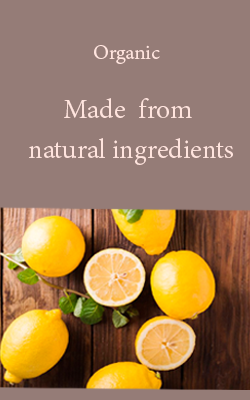
<style>
.page{position:relative;width:250px;height:400px;background:#957c77}
.page>*{position:absolute;margin:0}
.t1{font:25px "AdobeThai-Regular";color:#ffe4de}
.t2{font:33.3px "AdobeThai-Regular";color:#ffe4de}
</style>
<div class="page">
<p class="t1" style="left:94px;top:45px;width:66px;height:19px">Organic</p>
<p class="t2" style="left:29px;top:98px;width:204px;height:67px;text-align:center"><span class="t1"><br></span>Made  from <br>natural ingredients</p>
</div>
